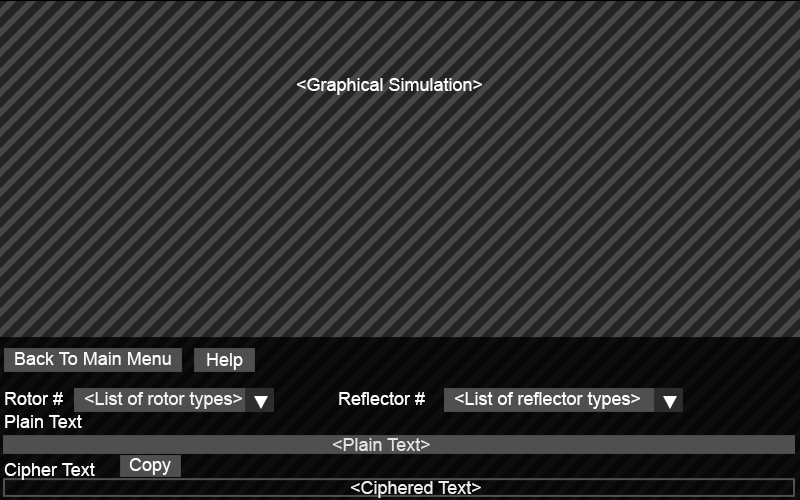
<style>
.page{position:relative;width:800px;height:500px;background:#232323}
.page>*{position:absolute;margin:0}
.t1{font:18px "ArialMT";color:#ffffff}
.t2{font:18px "ArialMT";color:#fdfbfb}
.t3{font:18px "ArialMT";color:#f5f5f5}
.t4{font:18px "ArialMT";color:#e2e2e2}
.t5{font:18px "ArialMT";color:#ededed}
</style>
<div class="page">
<p class="t1" style="left:296px;top:78px;width:187px;height:17px">&lt;Graphical Simulation&gt;</p>
<p class="t2" style="left:15px;top:352px;width:156px;height:13px">Back To Main Menu</p>
<p class="t2" style="left:207px;top:353px;width:36px;height:17px">Help</p>
<p class="t2" style="left:5px;top:392px;width:58px;height:13px">Rotor #</p>
<p class="t3" style="left:84px;top:392px;width:159px;height:17px">&lt;List of rotor types&gt;</p>
<p class="t2" style="left:339px;top:392px;width:86px;height:13px">Reflector #</p>
<p class="t1" style="left:454px;top:392px;width:187px;height:17px">&lt;List of reflector types&gt;</p>
<p class="t2" style="left:5px;top:415px;width:77px;height:13px">Plain Text</p>
<p class="t4" style="left:332px;top:438px;width:98px;height:13px">&lt;Plain Text&gt;</p>
<p class="t2" style="left:129px;top:458px;width:42px;height:17px">Copy</p>
<p class="t2" style="left:4px;top:463px;width:91px;height:17px">Cipher Text</p>
<p class="t5" style="left:350px;top:481px;width:131px;height:17px">&lt;Ciphered Text&gt;</p>
</div>
